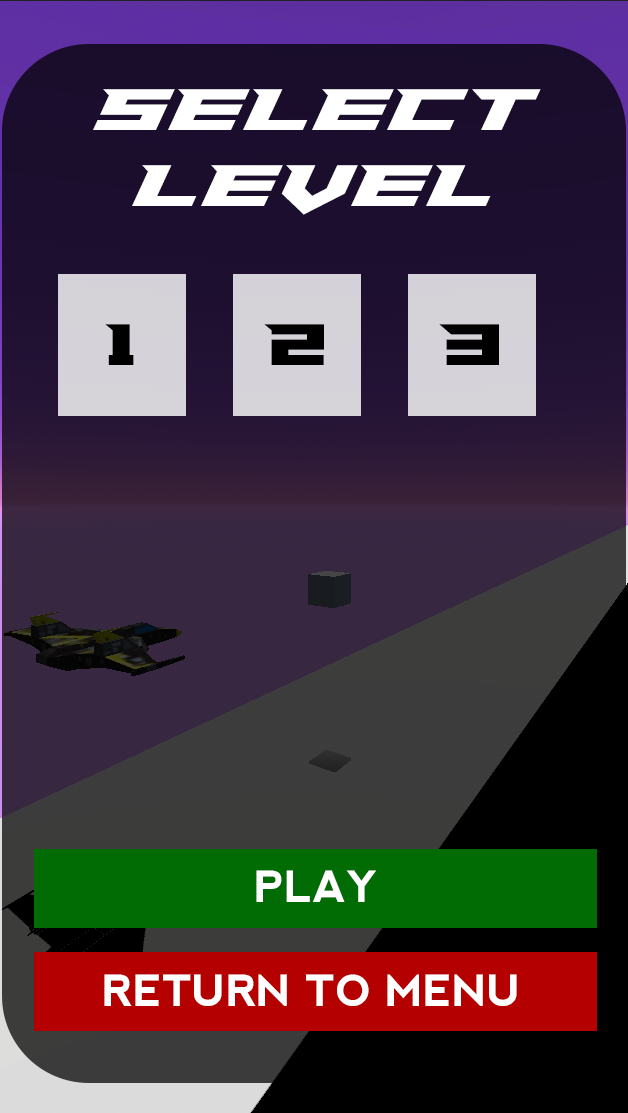
<style>
.page{position:relative;width:628px;height:1113px}
.page>*{position:absolute;margin:0}
.t1{font:63px "PaladinsExpanded";color:#ffffff}
.t2{font:63px "PaladinsStraight";color:#000000}
.t3{font:43px "nevis-Bold";color:#ffffff}
</style>
<div class="page">
<p class="t1" style="left:93px;top:89px;width:448px;height:126px;text-align:center">SELECT<br>LEVEL</p>
<p class="t2" style="left:105px;top:324px;width:29px;height:41px">1</p>
<p class="t2" style="left:264px;top:324px;width:60px;height:41px">2</p>
<p class="t2" style="left:439px;top:324px;width:60px;height:41px">3</p>
<p class="t3" style="left:256px;top:870px;width:120px;height:32px">PLAY</p>
<p class="t3" style="left:104px;top:974px;width:413px;height:32px">RETURN TO MENU</p>
</div>
